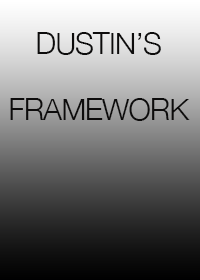
<style>
.page{position:relative;width:200px;height:280px}
.page>*{position:absolute;margin:0}
.t1{font:30px/20.9px "HelveticaNeue-Light";letter-spacing:-0.025em;color:#0d0c0c;text-transform:uppercase}
</style>
<div class="page">
<p class="t1" style="left:10px;top:32px;width:180px;height:89px;text-align:center">Dustin’s<br>Framework</p>
</div>
